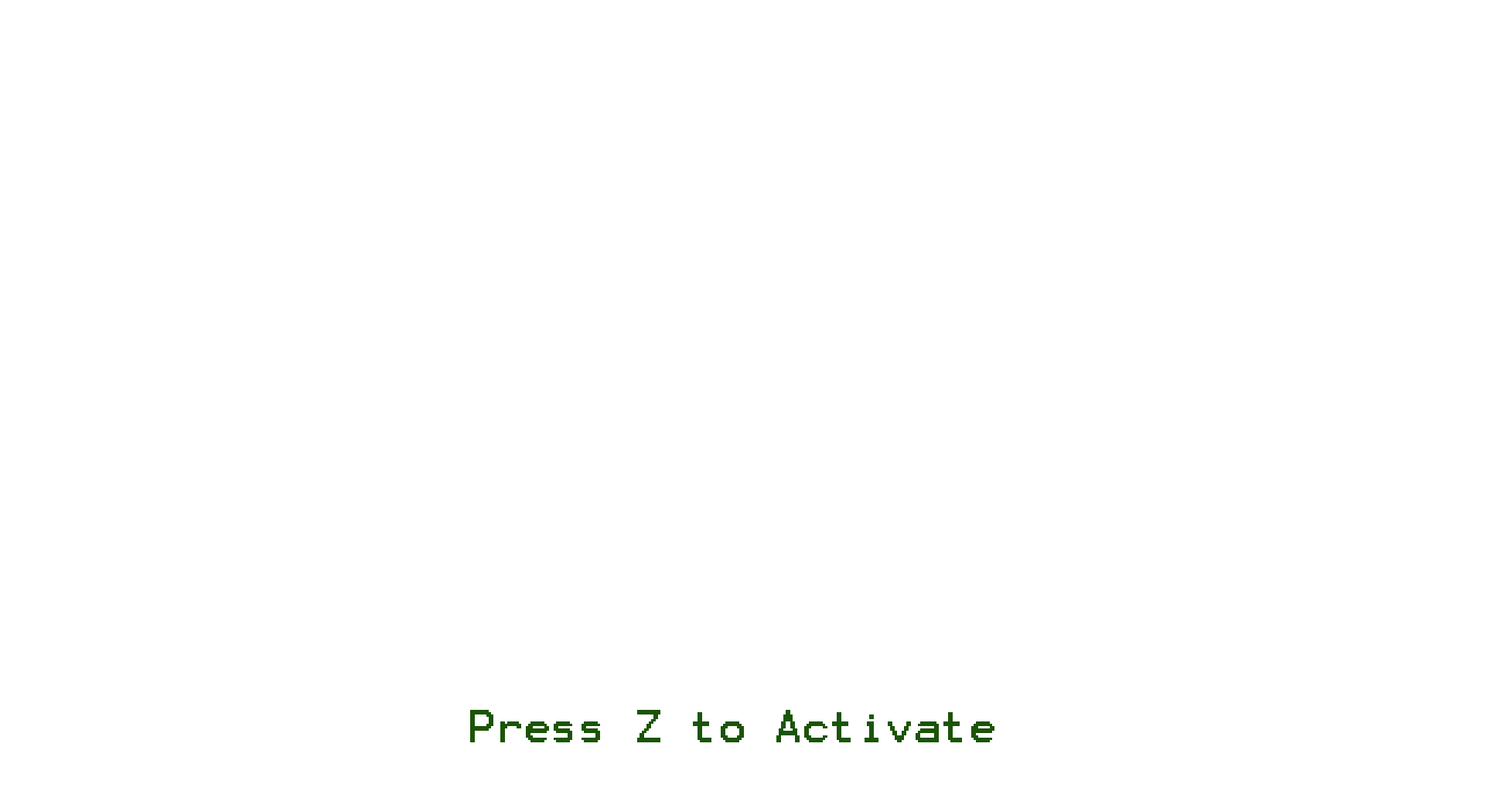
<style>
.page{position:relative;width:1494px;height:798px;background:#ffffff}
.page>*{position:absolute;margin:0}
.t1{font:37.1px "Terminal";color:#1b5407}
</style>
<div class="page">
<p class="t1" style="left:470px;top:710px;width:525px;height:32px">Press Z to Activate</p>
</div>
